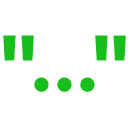
<style>
.page{position:relative;width:128px;height:128px;background:#ffffff}
.page>*{position:absolute;margin:0}
.t1{font:80px "CascadiaMonoRoman-Bold";letter-spacing:-0.3em;color:#18bf1c}
</style>
<div class="page">
<p class="t1" style="left:3px;top:35px;width:123px;height:57px">"..."</p>
</div>
